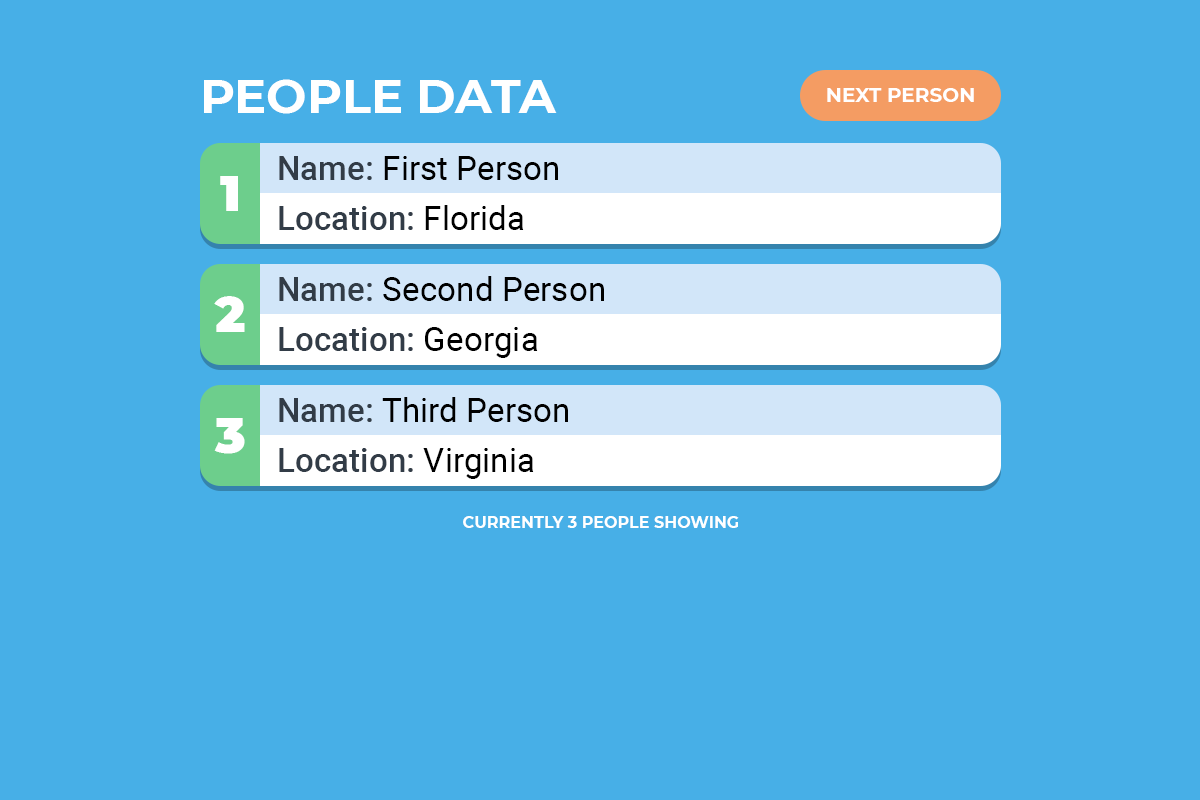
<style>
.page{position:relative;width:1200px;height:800px;background:#47afe7}
.page>*{position:absolute;margin:0}
.t1{font:48px "Montserrat-Bold";color:#ffffff}
.t2{font:20px "Montserrat-Bold";color:#ffffff}
.t3{font:33.3px/50px "Roboto-Regular";color:#000000}
.t4{font:33.3px/50px "Roboto-Medium";color:#323c47}
.t5{font:50px "Montserrat-Black";color:#ffffff}
.t6{font:16px "Montserrat-Bold";color:#ffffff}
</style>
<div class="page">
<p class="t1" style="left:204px;top:79px;width:353px;height:35px">PEOPLE DATA</p>
<p class="t2" style="left:827px;top:88px;width:147px;height:14px">NEXT PERSON</p>
<p class="t3" style="left:279px;top:156px;width:279px;height:74px"><span class="t4">Name:</span> First Person<br><span class="t4">Location:</span> Florida</p>
<p class="t5" style="left:220px;top:176px;width:18px;height:35px">1</p>
<p class="t3" style="left:279px;top:276px;width:325px;height:82px"><span class="t4">Name:</span> Second Person<br><span class="t4">Location:</span> Georgia</p>
<p class="t5" style="left:214px;top:296px;width:31px;height:36px">2</p>
<p class="t3" style="left:279px;top:397px;width:289px;height:82px"><span class="t4">Name:</span> Third Person<br><span class="t4">Location:</span> Virginia</p>
<p class="t5" style="left:214px;top:418px;width:31px;height:36px">3</p>
<p class="t6" style="left:463px;top:516px;width:276px;height:12px">CURRENTLY 3 PEOPLE SHOWING</p>
</div>
